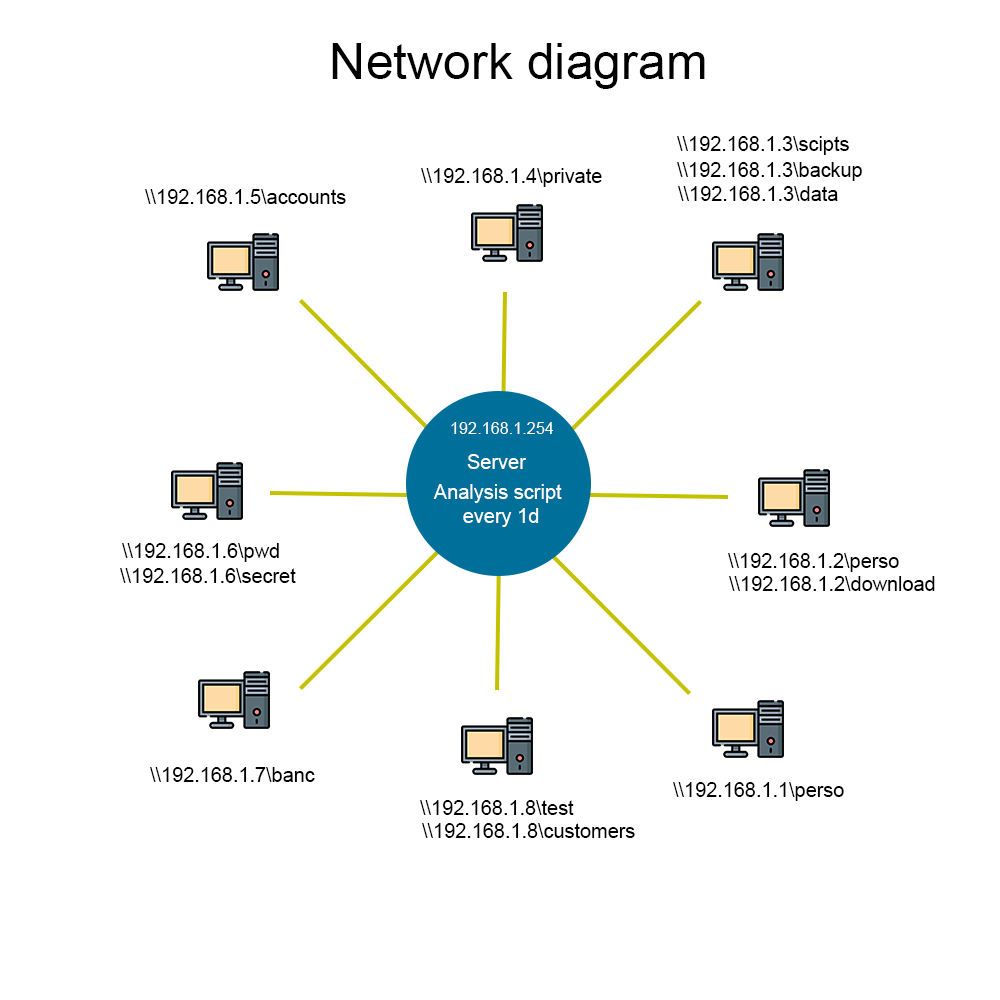
<style>
.page{position:relative;width:1000px;height:1000px;background:#ffffff}
.page>*{position:absolute;margin:0}
.t1{font:50px "ArialMT";color:#000000}
.t2{font:20px "ArialMT";color:#000000}
.t3{font:16.1px "ArialMT";color:#ffffff}
.t4{font:20px "ArialMT";color:#ffffff}
</style>
<div class="page">
<p class="t1" style="left:332px;top:43px;width:373px;height:46px">Network diagram</p>
<p class="t2" style="left:677px;top:136px;width:172px;height:19px">\\192.168.1.3\scipts</p>
<p class="t2" style="left:421px;top:168px;width:181px;height:19px">\\192.168.1.4\private</p>
<p class="t2" style="left:677px;top:162px;width:185px;height:19px">\\192.168.1.3\backup</p>
<p class="t2" style="left:145px;top:189px;width:201px;height:15px">\\192.168.1.5\accounts</p>
<p class="t2" style="left:678px;top:186px;width:160px;height:15px">\\192.168.1.3\data</p>
<p class="t3" style="left:451px;top:422px;width:103px;height:12px">192.168.1.254</p>
<p class="t4" style="left:467px;top:454px;width:59px;height:15px">Server</p>
<p class="t4" style="left:433px;top:484px;width:129px;height:43px">Analysis script<br>      every 1d</p>
<p class="t2" style="left:122px;top:543px;width:157px;height:19px">\\192.168.1.6\pwd</p>
<p class="t2" style="left:728px;top:553px;width:171px;height:19px">\\192.168.1.2\perso</p>
<p class="t2" style="left:120px;top:568px;width:176px;height:15px">\\192.168.1.6\secret</p>
<p class="t2" style="left:729px;top:576px;width:206px;height:15px">\\192.168.1.2\download</p>
<p class="t2" style="left:150px;top:767px;width:165px;height:15px">\\192.168.1.7\banc</p>
<p class="t2" style="left:673px;top:782px;width:171px;height:19px">\\192.168.1.1\perso</p>
<p class="t2" style="left:420px;top:800px;width:154px;height:15px">\\192.168.1.8\test</p>
<p class="t2" style="left:422px;top:823px;width:213px;height:15px">\\192.168.1.8\customers</p>
</div>
